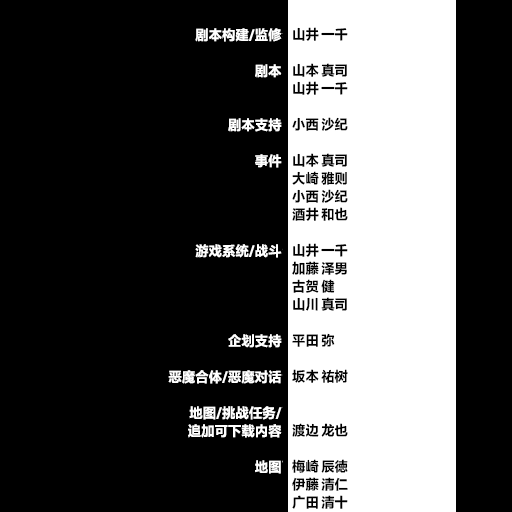
<style>
.page{position:relative;width:512px;height:512px;background:#000000}
.page>*{position:absolute;margin:0}
.t1{font:13.5px/18px "FZLTHProGlobal-Bold";letter-spacing:0.005em;color:#ffffff}
.t2{font:13.5px/18px "FZLTHProGlobal-Bold";letter-spacing:0.005em;color:#000000}
</style>
<div class="page">
<p class="t1" style="left:168px;top:28px;width:114px;height:446px;text-align:right">剧本构建/监修<br><br>剧本<br><br><br>剧本支持<br><br>事件<br><br><br><br><br>游戏系统/战斗<br><br><br><br><br>企划支持<br><br>恶魔合体/恶魔对话<br><br>地图/挑战任务/<br>追加可下载内容<br><br>地图</p>
<p class="t2" style="left:292px;top:27px;width:56px;height:482px">山井 一千<br><br>山本 真司<br>山井 一千<br><br>小西 沙纪<br><br>山本 真司<br>大崎 雅则<br>小西 沙纪<br>酒井 和也<br><br>山井 一千<br>加藤 泽男<br>古贺 健<br>山川 真司<br><br>平田 弥<br><br>坂本 祐树<br><br><br>渡边 龙也<br><br>梅崎 辰徳<br>伊藤 清仁<br>广田 清十</p>
</div>
